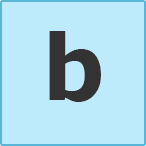
<style>
.page{position:relative;width:146px;height:146px;background:#beebfc}
.page>*{position:absolute;margin:0}
.t1{font:90px "Verdana-Bold";color:#333333}
</style>
<div class="page">
<p class="t1" style="left:49px;top:31px;width:52px;height:71px">b</p>
</div>
